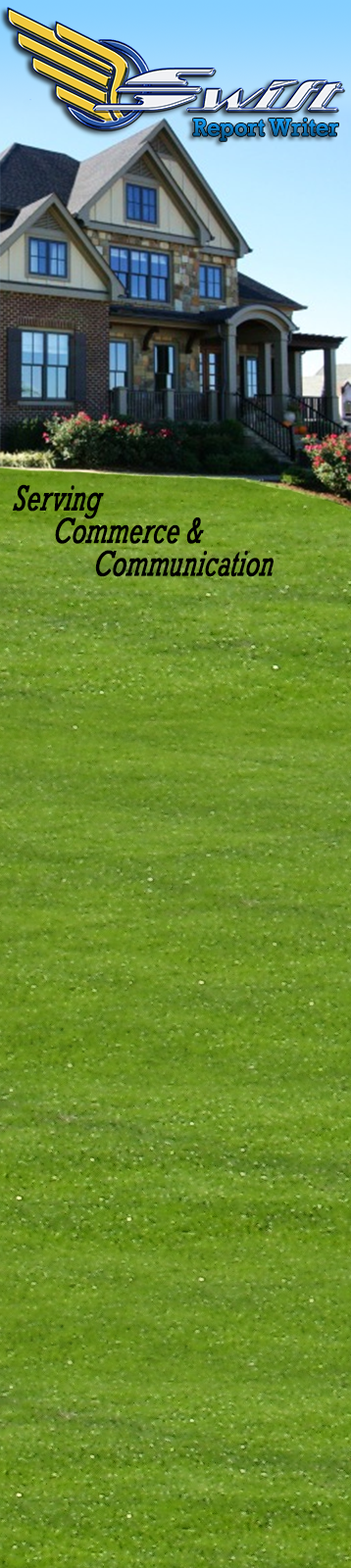
<style>
.page{position:relative;width:351px;height:1568px}
.page>*{position:absolute;margin:0}
.t1{font:24.5px "Rockwell";letter-spacing:-0.005em;font-weight:bold;scale:0.9 1}
.t2{font:36.2px "Rockwell-Italic";letter-spacing:-0.005em;color:#000000;font-weight:bold;font-style:italic;scale:0.68 1}
</style>
<div class="page">
<p class="t1" style="left:193px;top:118px;width:145px;height:23px">Report Writer</p>
<p class="t2" style="left:13px;top:484px;width:260px;height:93px">Serving <br>      Commerce &amp; <br>            Communication</p>
</div>
